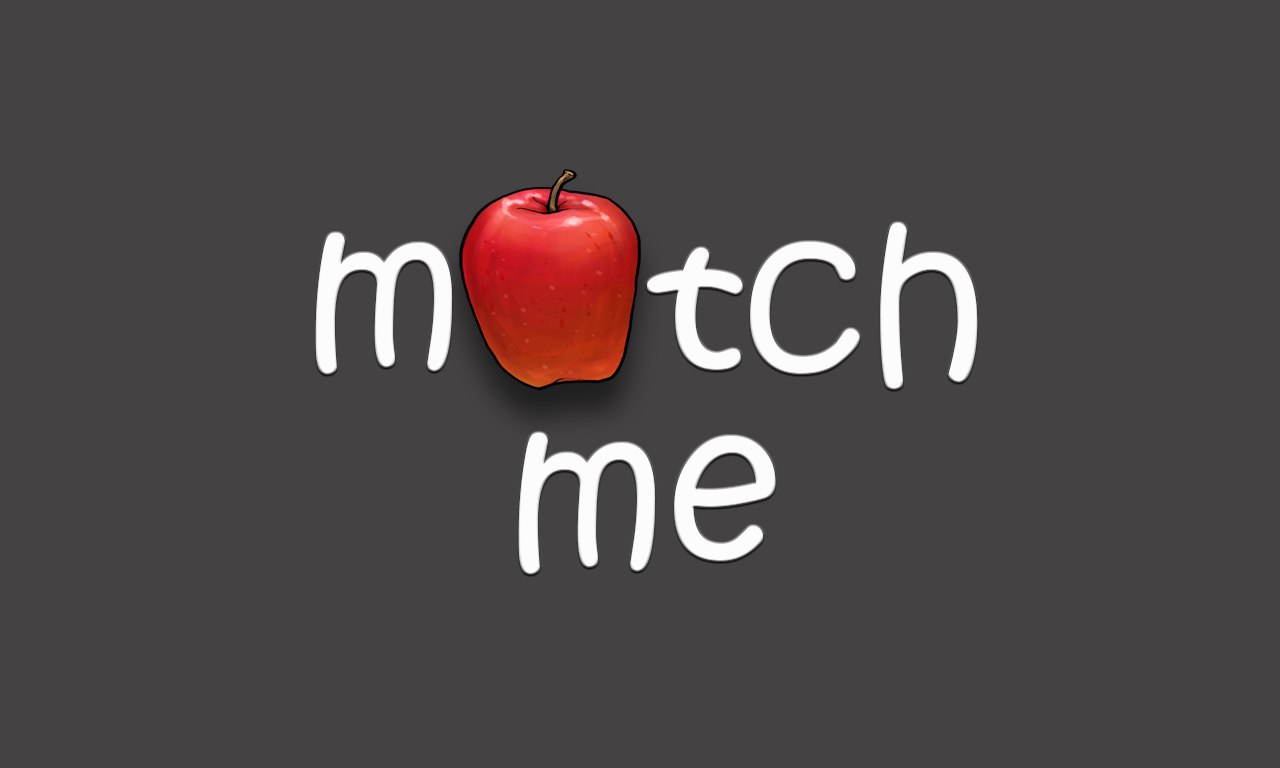
<style>
.page{position:relative;width:1280px;height:768px;background:#444242}
.page>*{position:absolute;margin:0}
.t1{font:200px "KristenITC-Regular";color:#fcfcfc}
</style>
<div class="page">
<p class="t1" style="left:646px;top:222px;width:332px;height:168px">tch</p>
<p class="t1" style="left:315px;top:232px;width:138px;height:143px">m</p>
<p class="t1" style="left:518px;top:432px;width:258px;height:143px">me</p>
</div>
